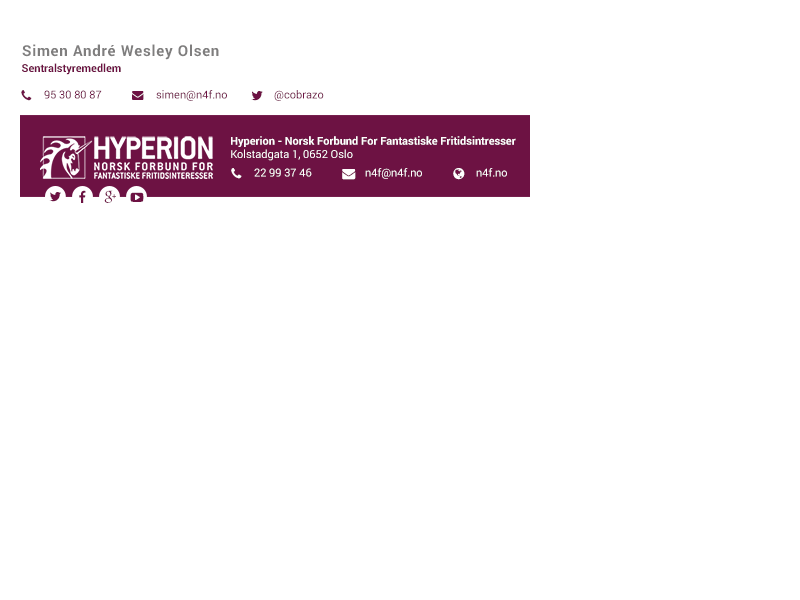
<style>
.page{position:relative;width:800px;height:600px;background:#ffffff}
.page>*{position:absolute;margin:0}
.t1{font:15px "Roboto-Bold";letter-spacing:0.05em;color:#7f7e7e}
.t2{font:11px "Roboto-Bold";color:#6d1243}
.t3{font:11px "Roboto-Regular";color:#6d1243}
.t4{font:11px "Roboto-Bold";color:#fefefe}
.t5{font:11px "Roboto-Regular";color:#fefefe}
</style>
<div class="page">
<p class="t1" style="left:22px;top:44px;width:197px;height:16px">Simen André Wesley Olsen</p>
<p class="t2" style="left:22px;top:63px;width:99px;height:12px">Sentralstyremedlem</p>
<p class="t3" style="left:44px;top:90px;width:58px;height:9px">95 30 80 87</p>
<p class="t3" style="left:156px;top:90px;width:71px;height:11px">simen@n4f.no</p>
<p class="t3" style="left:274px;top:90px;width:50px;height:11px">@cobrazo</p>
<p class="t4" style="left:231px;top:136px;width:285px;height:25px">Hyperion - Norsk Forbund For Fantastiske Fritidsintresser<br><span class="t5">Kolstadgata 1, 0652 Oslo</span></p>
<p class="t5" style="left:254px;top:168px;width:58px;height:9px">22 99 37 46</p>
<p class="t5" style="left:365px;top:168px;width:57px;height:11px">n4f@n4f.no</p>
<p class="t5" style="left:476px;top:168px;width:31px;height:9px">n4f.no</p>
</div>
